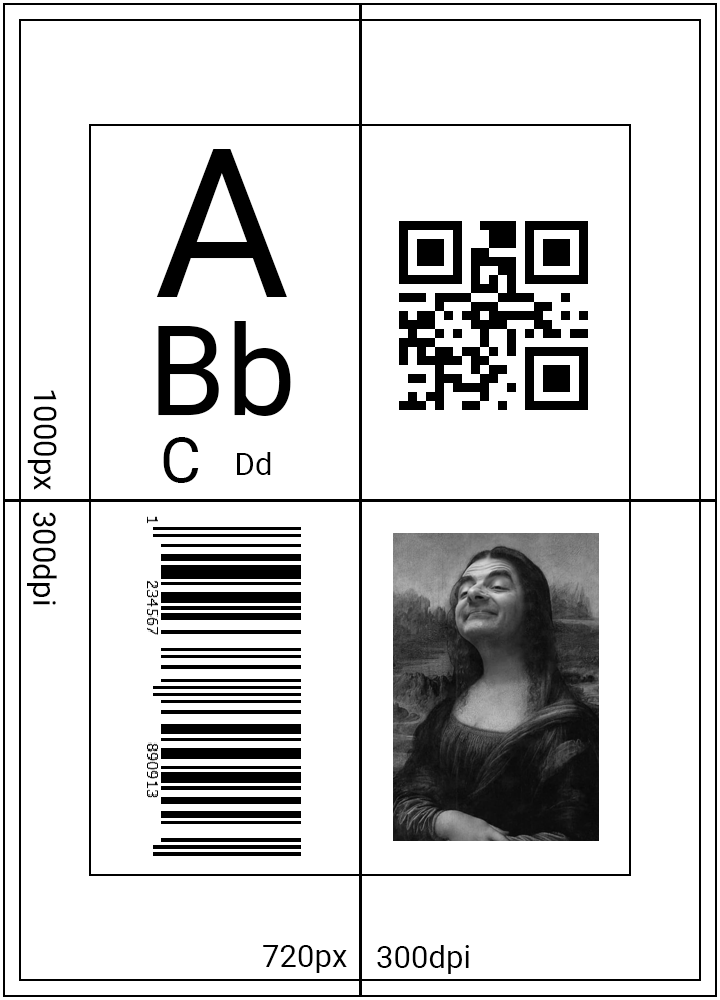
<style>
.page{position:relative;width:720px;height:1000px;background:#ffffff}
.page>*{position:absolute;margin:0}
.t1{font:208.3px "Roboto-Regular";color:#000000}
.t2{font:125px "Roboto-Regular";color:#000000}
.t3{font:31.2px "Roboto-Regular";color:#000000}
.t4{font:62.5px "Roboto-Regular";color:#000000}
</style>
<div class="page">
<p class="t1" style="left:156px;top:149px;width:131px;height:148px">A</p>
<p class="t2" style="left:158px;top:321px;width:133px;height:95px">Bb</p>
<p class="t3" style="left:27px;top:390px;width:30px;height:100px;rotate:90deg">1000px</p>
<p class="t4" style="left:163px;top:437px;width:36px;height:46px">C</p>
<p class="t3" style="left:237px;top:452px;width:34px;height:23px">Dd</p>
<p class="t3" style="left:27px;top:512px;width:30px;height:93px;rotate:90deg">300dpi</p>
<p class="t3" style="left:263px;top:945px;width:84px;height:28px">720px</p>
<p class="t3" style="left:377px;top:945px;width:92px;height:29px">300dpi</p>
</div>
